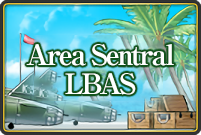
<style>
.page{position:relative;width:201px;height:135px}
.page>*{position:absolute;margin:0}
.t1{font:28px/29px "RyuminPro-ExBold";letter-spacing:-0.08em;color:#ffffff}
</style>
<div class="page">
<p class="t1" style="left:26px;top:44px;width:148px;height:51px;text-align:center">Area Sentral<br>LBAS</p>
</div>
